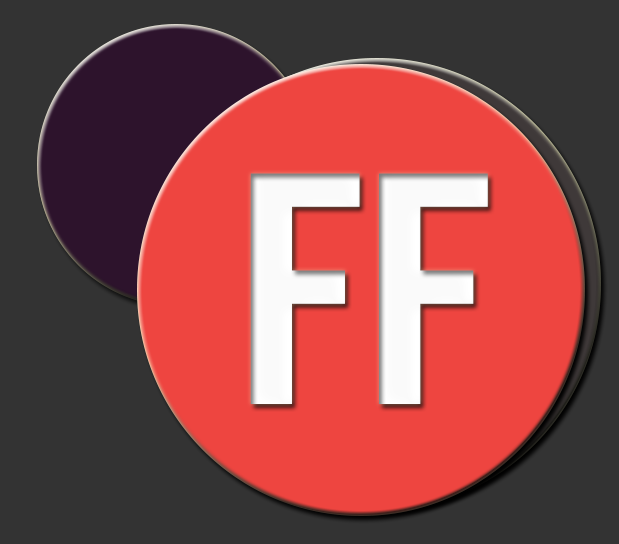
<style>
.page{position:relative;width:619px;height:544px;background:#333333}
.page>*{position:absolute;margin:0}
.t1{font:329.1px "BebasNeue-Regular";color:#ffffff;scale:1.13 1}
</style>
<div class="page">
<p class="t1" style="left:250px;top:173px;width:238px;height:231px">ff</p>
</div>
